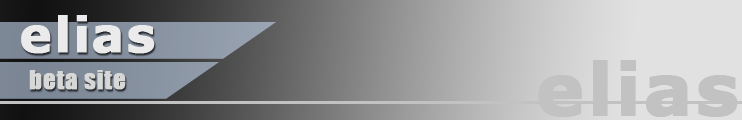
<style>
.page{position:relative;width:742px;height:120px}
.page>*{position:absolute;margin:0}
.t1{font:48px "Verdana-Bold";letter-spacing:0.025em;color:#ebebeb;font-weight:bold}
.t2{font:72px "Verdana-Bold";letter-spacing:0.025em;color:#c2c2c2;font-weight:bold}
.t3{font:24px "Impact";letter-spacing:0.025em;color:#d7d7d7;font-weight:bold}
</style>
<div class="page">
<p class="t1" style="left:21px;top:15px;width:134px;height:39px">elias</p>
<p class="t2" style="left:538px;top:60px;width:200px;height:57px">elias</p>
<p class="t3" style="left:29px;top:70px;width:97px;height:20px">beta site</p>
</div>
